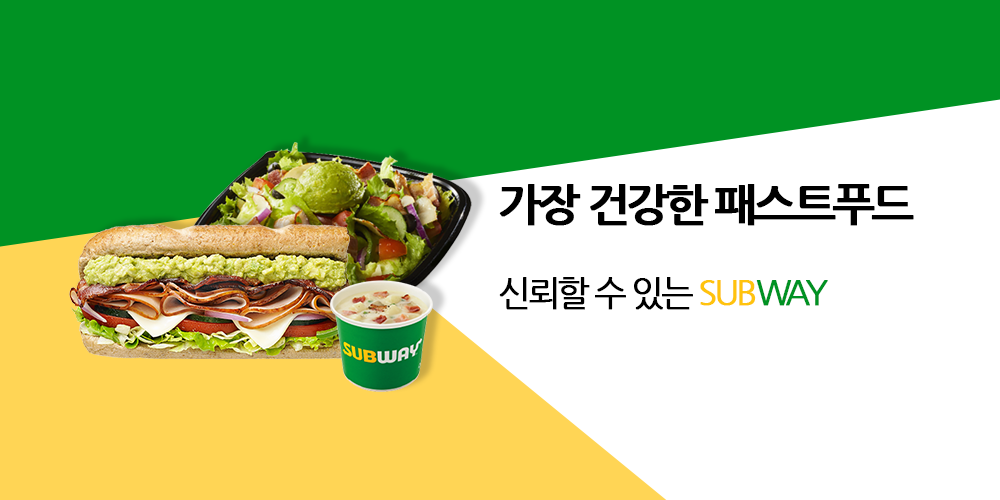
<style>
.page{position:relative;width:1000px;height:500px;background:#ffffff}
.page>*{position:absolute;margin:0}
.t1{font:44.8px "NanumGothicBold";letter-spacing:-0.075em;color:#000000;font-weight:bold}
.t2{font:33.7px "NanumGothic";letter-spacing:-0.075em;color:#000000;font-weight:bold}
.t3{font:33.7px "NanumGothic";letter-spacing:-0.075em;color:#ffc30d;font-weight:bold}
.t4{font:33.7px "NanumGothic";letter-spacing:-0.075em;color:#009223;font-weight:bold}
</style>
<div class="page">
<p class="t1" style="left:499px;top:184px;width:415px;height:42px">가장 건강한 패스트푸드</p>
<p class="t2" style="left:499px;top:277px;width:329px;height:33px">신뢰할 수 있는 <span class="t3">SUB</span><span class="t4">WAY</span></p>
</div>
